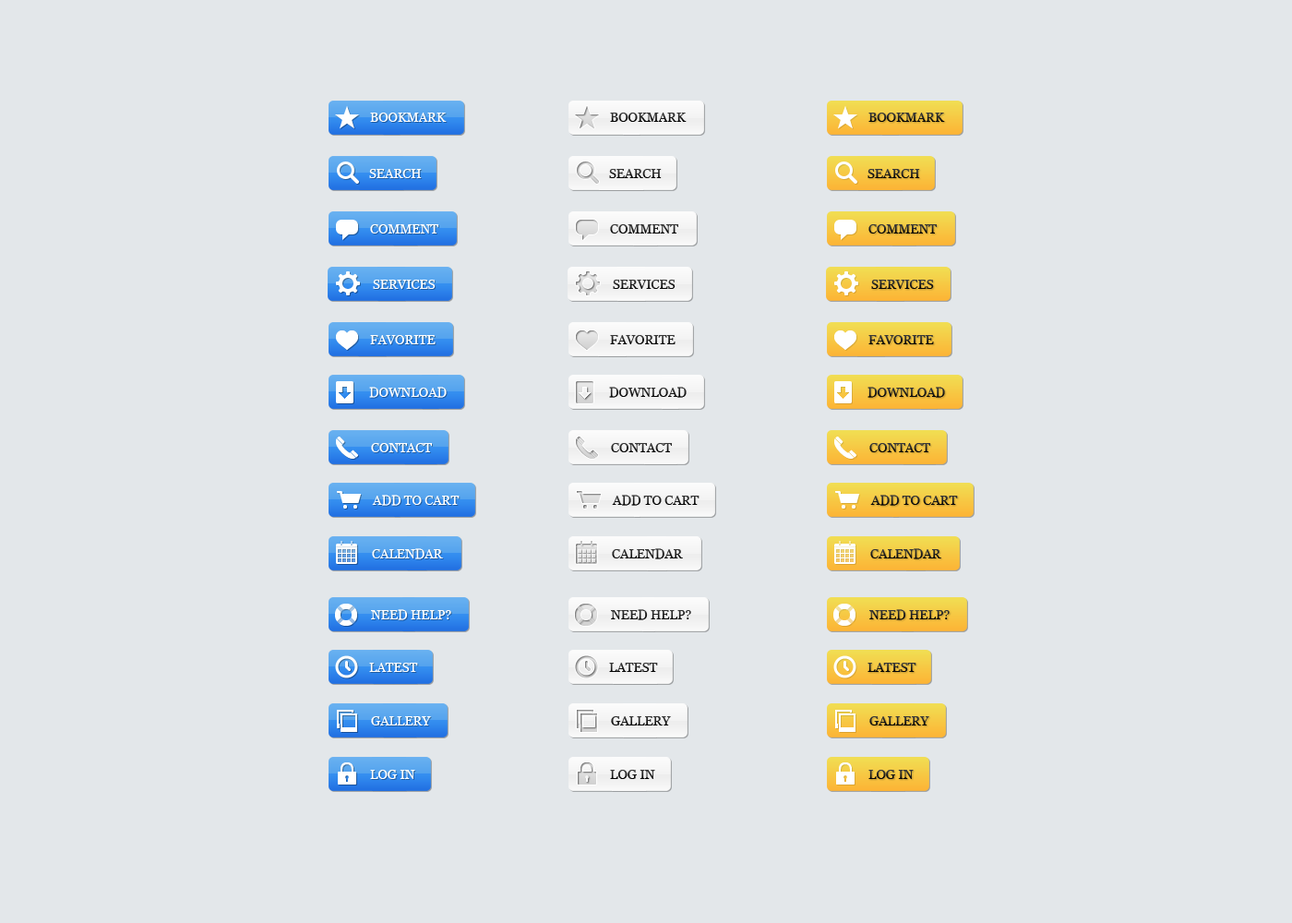
<style>
.page{position:relative;width:1292px;height:923px;background:#e3e7ea}
.page>*{position:absolute;margin:0}
.t1{font:12.9px "Georgia";color:#ffffff}
.t2{font:12.9px "Georgia"}
.t3{font:12.9px "Georgia";color:#222222}
</style>
<div class="page">
<p class="t1" style="left:370px;top:113px;width:77px;height:9px">BOOKMARK</p>
<p class="t2" style="left:610px;top:113px;width:77px;height:9px">BOOKMARK</p>
<p class="t2" style="left:868px;top:113px;width:77px;height:9px">BOOKMARK</p>
<p class="t1" style="left:369px;top:169px;width:53px;height:9px">SEARCH</p>
<p class="t2" style="left:609px;top:169px;width:53px;height:9px">SEARCH</p>
<p class="t2" style="left:868px;top:169px;width:52px;height:9px">SEARCH</p>
<p class="t1" style="left:370px;top:224px;width:68px;height:9px">COMMENT</p>
<p class="t2" style="left:610px;top:224px;width:68px;height:9px">COMMENT</p>
<p class="t2" style="left:868px;top:224px;width:69px;height:9px">COMMENT</p>
<p class="t1" style="left:373px;top:280px;width:63px;height:9px">SERVICES</p>
<p class="t2" style="left:613px;top:280px;width:63px;height:9px">SERVICES</p>
<p class="t2" style="left:871px;top:280px;width:63px;height:9px">SERVICES</p>
<p class="t1" style="left:370px;top:335px;width:66px;height:9px">FAVORITE</p>
<p class="t2" style="left:610px;top:335px;width:66px;height:9px">FAVORITE</p>
<p class="t2" style="left:868px;top:335px;width:66px;height:9px">FAVORITE</p>
<p class="t1" style="left:369px;top:387px;width:78px;height:11px">DOWNLOAD</p>
<p class="t2" style="left:609px;top:387px;width:78px;height:11px">DOWNLOAD</p>
<p class="t2" style="left:868px;top:387px;width:77px;height:11px">DOWNLOAD</p>
<p class="t1" style="left:371px;top:443px;width:61px;height:9px">CONTACT</p>
<p class="t2" style="left:611px;top:443px;width:61px;height:9px">CONTACT</p>
<p class="t2" style="left:869px;top:443px;width:61px;height:9px">CONTACT</p>
<p class="t1" style="left:372px;top:495px;width:88px;height:11px">ADD TO CART</p>
<p class="t2" style="left:612px;top:495px;width:88px;height:11px">ADD TO CART</p>
<p class="t2" style="left:870px;top:495px;width:88px;height:11px">ADD TO CART</p>
<p class="t1" style="left:372px;top:548px;width:71px;height:11px">CALENDAR</p>
<p class="t2" style="left:612px;top:548px;width:71px;height:11px">CALENDAR</p>
<p class="t2" style="left:870px;top:548px;width:71px;height:11px">CALENDAR</p>
<p class="t1" style="left:371px;top:609px;width:80px;height:11px">NEED HELP?</p>
<p class="t3" style="left:611px;top:609px;width:80px;height:11px">NEED HELP?</p>
<p class="t3" style="left:869px;top:609px;width:81px;height:11px">NEED HELP?</p>
<p class="t1" style="left:369px;top:663px;width:49px;height:9px">LATEST</p>
<p class="t2" style="left:609px;top:663px;width:49px;height:9px">LATEST</p>
<p class="t2" style="left:868px;top:663px;width:48px;height:9px">LATEST</p>
<p class="t1" style="left:371px;top:716px;width:60px;height:9px">GALLERY</p>
<p class="t2" style="left:611px;top:716px;width:60px;height:9px">GALLERY</p>
<p class="t2" style="left:869px;top:716px;width:60px;height:9px">GALLERY</p>
<p class="t1" style="left:370px;top:770px;width:45px;height:9px">LOG IN</p>
<p class="t2" style="left:610px;top:770px;width:45px;height:9px">LOG IN</p>
<p class="t2" style="left:868px;top:770px;width:46px;height:9px">LOG IN</p>
</div>
